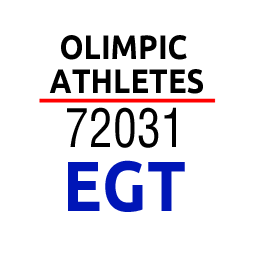
<style>
.page{position:relative;width:256px;height:256px;background:#ffffff}
.page>*{position:absolute;margin:0}
.t1{font:33.7px/33.7px "Ubuntu-Bold";letter-spacing:0.005em;color:#000000;scale:0.9 1}
.t2{font:52.5px "SwitzerlandCondensed";letter-spacing:0.005em;color:#000000;scale:0.9 1}
.t3{font:70.7px "Ubuntu-Bold";letter-spacing:0.005em;color:#0016b7;scale:0.9 1}
</style>
<div class="page">
<p class="t1" style="left:49px;top:35px;width:154px;height:59px;text-align:center">OLIMPIC <br>ATHLETES</p>
<p class="t2" style="left:67px;top:107px;width:109px;height:41px">72031</p>
<p class="t3" style="left:68px;top:160px;width:117px;height:52px">EGT</p>
</div>
